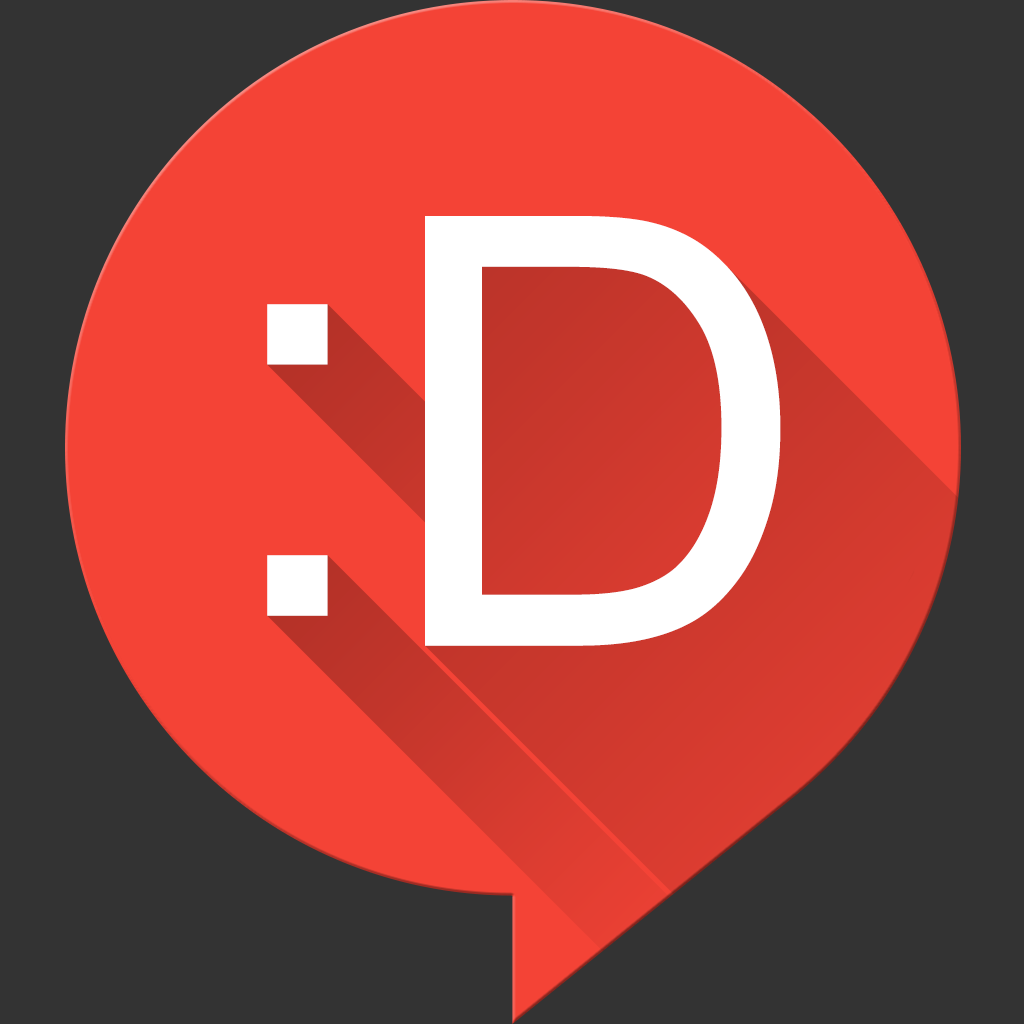
<style>
.page{position:relative;width:1024px;height:1024px;background:#333333}
.page>*{position:absolute;margin:0}
.t1{font:600px "ArialMT";color:#ffffff}
</style>
<div class="page">
<p class="t1" style="left:425px;top:216px;width:356px;height:430px">D</p>
<p class="t1" style="left:267px;top:304px;width:61px;height:312px">:</p>
</div>
